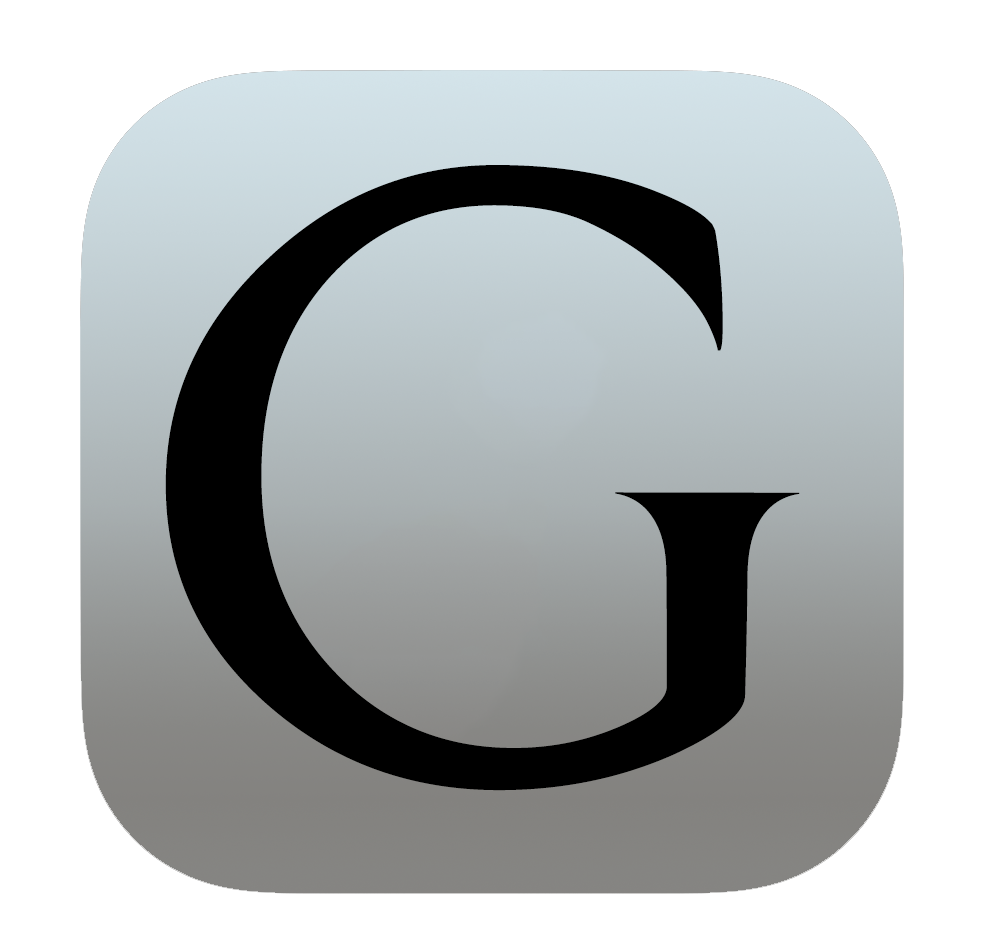
<style>
.page{position:relative;width:988px;height:932px;background:#ffffff}
.page>*{position:absolute;margin:0}
.t1{font:864px "Assassin$";color:#000000}
</style>
<div class="page">
<p class="t1" style="left:165px;top:165px;width:635px;height:626px">G</p>
</div>
